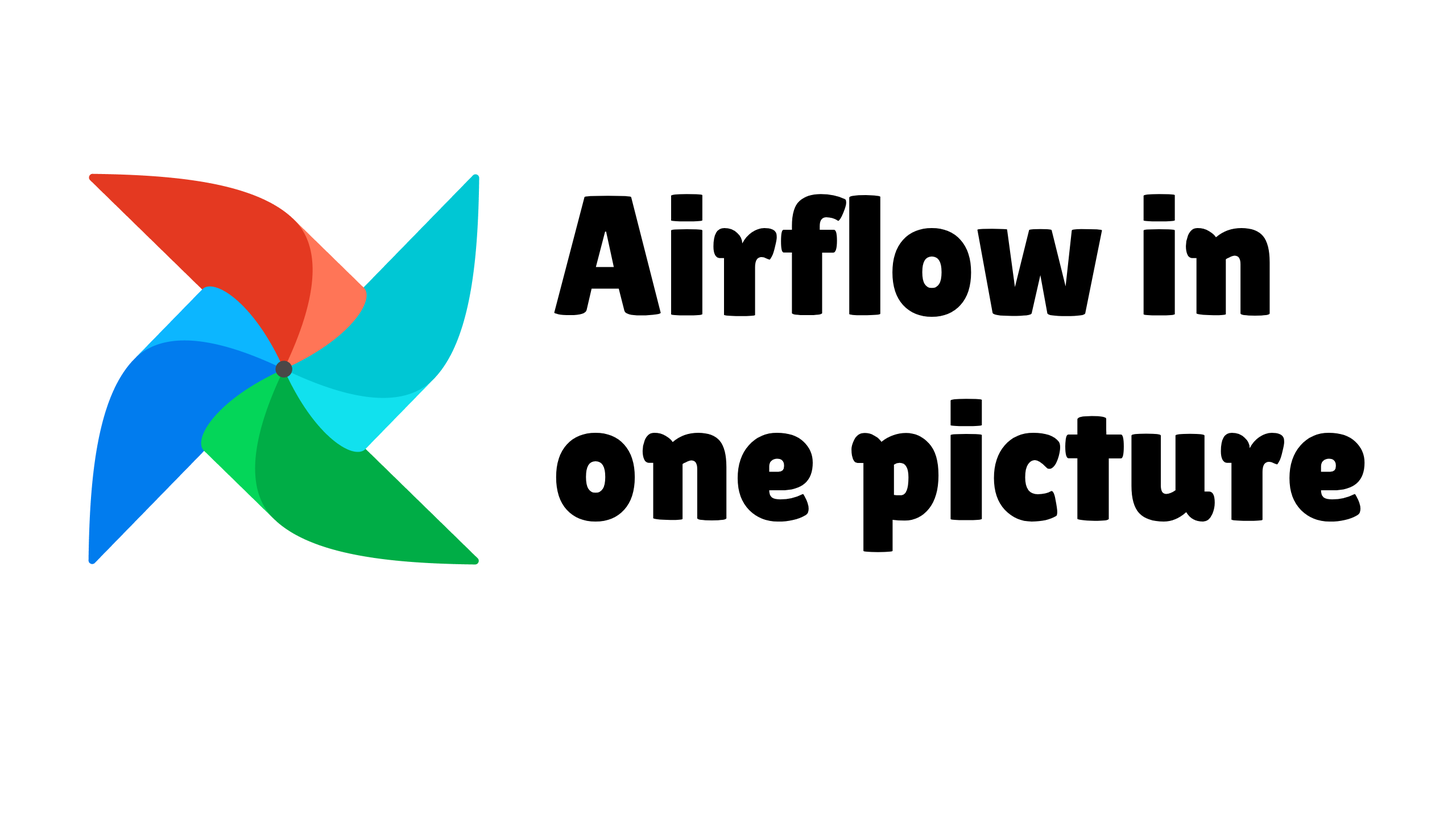
<style>
.page{position:relative;width:1456px;height:819px;background:#ffffff}
.page>*{position:absolute;margin:0}
.t1{font:170.6px "LilitaOne";color:#000000}
</style>
<div class="page">
<p class="t1" style="left:554px;top:194px;width:811px;height:358px">Airflow in one picture</p>
</div>
